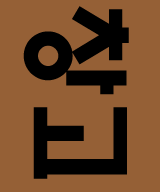
<style>
.page{position:relative;width:160px;height:192px;background:#956036}
.page>*{position:absolute;margin:0}
.t1{font:112.3px "HaanYHeadM";color:#000000}
</style>
<div class="page">
<p class="t1" style="left:23px;top:6px;width:106px;height:173px;rotate:90deg">창고</p>
</div>
